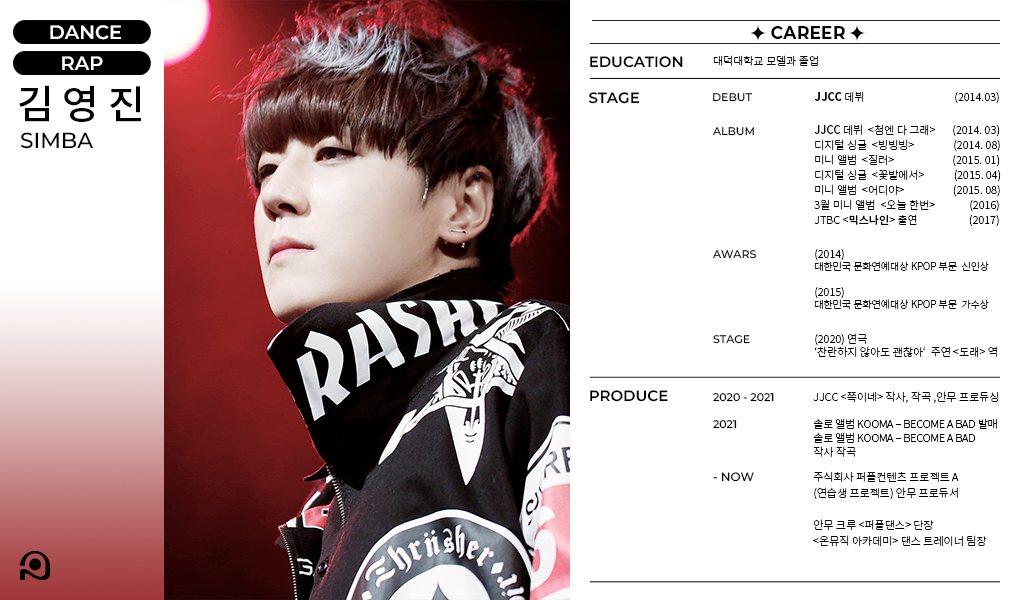
<style>
.page{position:relative;width:1020px;height:600px;background:#ffffff}
.page>*{position:absolute;margin:0}
.t1{font:19.4px "Montserrat-SemiBold";color:#fffefe}
.t2{font:17.3px "Montserrat-Bold";color:#000000}
.t3{font:15px "Montserrat-SemiBold";color:#000000}
.t4{font:11px "NotoSansKR-Light";color:#000000}
.t5{font:39.9px "NotoSansKR-Medium";color:#000000}
.t6{font:11px "Montserrat-Medium";color:#000000}
.t7{font:11px "NotoSansKR-Bold";color:#000000}
.t8{font:11px/15px "NotoSansKR-Light";color:#000000}
.t9{font:11px/15px "NotoSansKR-Medium";color:#000000}
.t10{font:21.7px "Montserrat-Medium";color:#000000}
.t11{font:10px "NotoSansKR-Light";color:#000000}
.t12{font:11px/16px "NotoSansKR-Light";color:#000000}
.t13{font:11px/14px "NotoSansKR-Light";letter-spacing:-0.025em;color:#000000}
.t14{font:11px/14px "NotoSansKR-Light";color:#000000}
.t15{font:12px "Montserrat-Medium";color:#000000}
</style>
<div class="page">
<p class="t1" style="left:50px;top:25px;width:71px;height:15px">DANCE</p>
<p class="t2" style="left:771px;top:26px;width:74px;height:13px">CAREER</p>
<p class="t1" style="left:62px;top:56px;width:41px;height:14px">RAP</p>
<p class="t3" style="left:590px;top:56px;width:93px;height:12px">EDUCATION</p>
<p class="t4" style="left:713px;top:55px;width:105px;height:11px">대덕대학교 모델과 졸업</p>
<p class="t5" style="left:19px;top:85px;width:122px;height:37px">김 영 진</p>
<p class="t3" style="left:589px;top:92px;width:51px;height:12px">STAGE</p>
<p class="t6" style="left:713px;top:93px;width:40px;height:9px">DEBUT</p>
<p class="t7" style="left:814px;top:91px;width:50px;height:12px">JJCC<span class="t4"> 데뷔</span></p>
<p class="t4" style="left:955px;top:92px;width:44px;height:12px">(2014.03)</p>
<p class="t8" style="left:814px;top:124px;width:187px;height:103px"><span class="t9">JJCC</span> 데뷔  &lt;첨엔 다 그래&gt;       (2014. 03)<br>디지털 싱글  &lt;빙빙빙&gt;                (2014. 08) <br>미니 앨범  &lt;질러&gt;                        (2015. 01)<br>디지털 싱글  &lt;꽃밭에서&gt;            (2015. 04)<br>미니 앨범  &lt;어디야&gt;                    (2015. 08)<br>3월 미니 앨범  &lt;오늘 한번&gt;              (2016)<br>JTBC &lt;<span class="t9">믹스나인</span>&gt; 출연                     (2017)</p>
<p class="t10" style="left:21px;top:132px;width:73px;height:17px">SIMBA</p>
<p class="t6" style="left:713px;top:127px;width:41px;height:9px">ALBUM</p>
<p class="t6" style="left:713px;top:250px;width:43px;height:9px">AWARS</p>
<p class="t11" style="left:814px;top:249px;width:175px;height:61px"><span class="t4">(2014)<br></span>대한민국 문화연예대상 KPOP 부문  신인상<br><span class="t4"><br>(2015)<br></span>대한민국 문화연예대상 KPOP 부문  가수상</p>
<p class="t6" style="left:713px;top:335px;width:37px;height:9px">STAGE</p>
<p class="t4" style="left:814px;top:333px;width:183px;height:25px">(2020) 연극<br>‘찬란하지 않아도 괜찮아‘  주연 &lt;도래&gt; 역</p>
<p class="t3" style="left:590px;top:390px;width:78px;height:12px">PRODUCE</p>
<p class="t6" style="left:713px;top:393px;width:61px;height:9px">2020 - 2021</p>
<p class="t12" style="left:813px;top:391px;width:186px;height:156px"><span class="t4">JJCC &lt;쯕이네&gt; 작사, 작곡 ,안무 프로듀싱<br><br></span><span class="t13">솔로 앨범 KOOMA – BECOME A BAD 발매<br>솔로 앨범 KOOMA – BECOME A BAD <br></span><span class="t14">작사 작곡<br> <br></span>주식회사 퍼플컨텐츠 프로젝트 A <br>(연습생 프로젝트) 안무 프로듀서 <br><br>안무 크루 &lt;퍼플댄스&gt; 단장<br>&lt;온뮤직 아카데미&gt; 댄스 트레이너 팀장</p>
<p class="t6" style="left:713px;top:420px;width:24px;height:9px">2021</p>
<p class="t15" style="left:713px;top:472px;width:41px;height:10px">- NOW</p>
</div>
